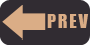
<style>
.page{position:relative;width:90px;height:45px;background:#312c32}
.page>*{position:absolute;margin:0}
.t1{font:18px "Impact";letter-spacing:0.1em;color:#daad86}
</style>
<div class="page">
<p class="t1" style="left:47px;top:14px;width:42px;height:14px">PREV</p>
</div>
